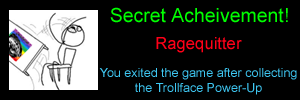
<style>
.page{position:relative;width:300px;height:100px;background:#000000}
.page>*{position:absolute;margin:0}
.t1{font:19.4px "ArialMT";color:#00ff00}
.t2{font:16.7px "ArialMT";color:#ff0018}
.t3{font:12.5px "ArialMT";color:#3fc7f2}
</style>
<div class="page">
<p class="t1" style="left:110px;top:7px;width:178px;height:16px">Secret Acheivement!</p>
<p class="t2" style="left:156px;top:37px;width:86px;height:16px">Ragequitter</p>
<p class="t3" style="left:99px;top:68px;width:198px;height:27px;text-align:center">You exited the game after collecting<br>the Trollface Power-Up</p>
</div>
